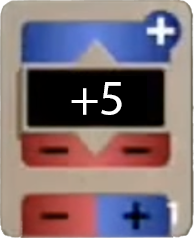
<style>
.page{position:relative;width:194px;height:238px}
.page>*{position:absolute;margin:0}
.t1{font:50px "MyriadPro-Regular";color:#ffffff}
</style>
<div class="page">
<p class="t1" style="left:71px;top:82px;width:51px;height:33px">+5</p>
</div>
